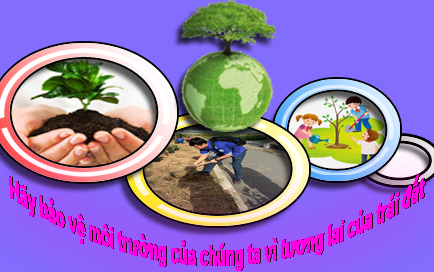
<style>
.page{position:relative;width:434px;height:272px;background:#826dff}
.page>*{position:absolute;margin:0}
.t1{font:30px "Arial-BoldMT";color:#ff00de;scale:0.48 1}
</style>
<div class="page">
<p class="t1" style="left:9px;top:174px;width:416px;height:97px;text-align:center">Hãy bảo vệ môi trường của chúng ta vì tương lai của trái đất</p>
<p class="t1" style="left:10px;top:174px;width:416px;height:97px;text-align:center">Hãy bảo vệ môi trường của chúng ta vì tương lai của trái đất</p>
</div>
